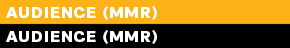
<style>
.page{position:relative;width:290px;height:48px;background:#000000}
.page>*{position:absolute;margin:0}
.t1{font:16px "PFEncoreSansPro-Black";letter-spacing:0.045em;color:#ffffff}
</style>
<div class="page">
<p class="t1" style="left:6px;top:6px;width:151px;height:14px">AUDIENCE (MMR)</p>
<p class="t1" style="left:6px;top:30px;width:151px;height:14px">AUDIENCE (MMR)</p>
</div>
